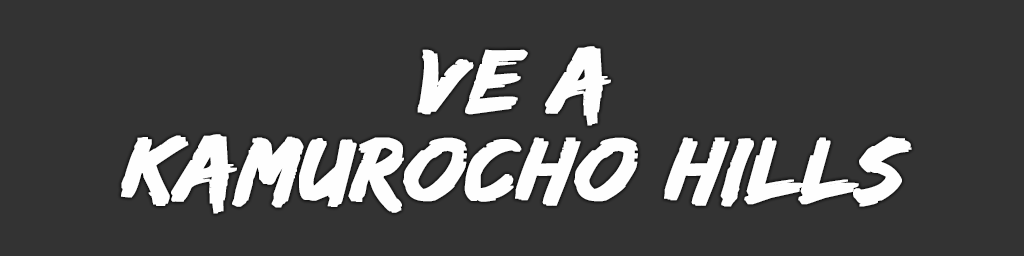
<style>
.page{position:relative;width:1024px;height:256px;background:#333333}
.page>*{position:absolute;margin:0}
.t1{font:94px/88px "EdoSZ";color:#fefefe;font-weight:bold;font-style:italic;scale:1.04 1}
</style>
<div class="page">
<p class="t1" style="left:121px;top:46px;width:791px;height:168px;text-align:center">ve a<br>kamurocho hills</p>
</div>
